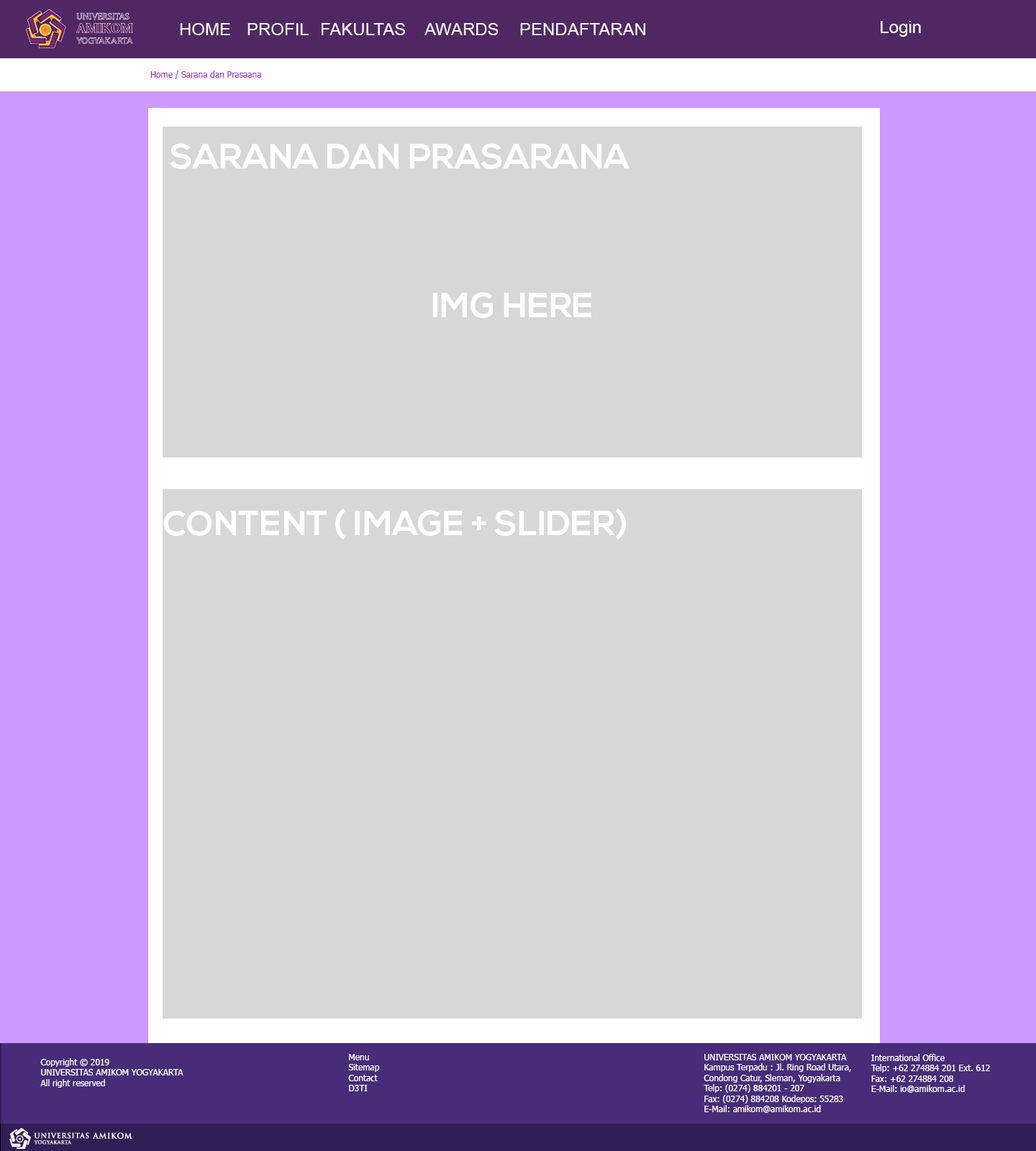
<style>
.page{position:relative;width:1036px;height:1151px;background:#d7d7d7}
.page>*{position:absolute;margin:0}
.t1{font:17.3px "ArialMT";color:#f7f7f7}
.t2{font:17.3px "ArialMT";color:#ffffff}
.t3{font:8.6px "Tahoma";color:#a135d9}
.t4{font:34.5px "NexaBold";color:#ffffff}
.t5{font:8.6px "Tahoma";color:#ffffff}
</style>
<div class="page">
<p class="t1" style="left:180px;top:23px;width:50px;height:12px">HOME</p>
<p class="t1" style="left:247px;top:23px;width:62px;height:12px">PROFIL</p>
<p class="t1" style="left:322px;top:23px;width:83px;height:12px">FAKULTAS</p>
<p class="t1" style="left:424px;top:23px;width:75px;height:12px">AWARDS</p>
<p class="t1" style="left:520px;top:23px;width:125px;height:12px">PENDAFTARAN</p>
<p class="t2" style="left:881px;top:21px;width:40px;height:16px">Login</p>
<p class="t3" style="left:150px;top:71px;width:111px;height:8px">Home / Sarana dan Prasaana</p>
<p class="t4" style="left:170px;top:143px;width:459px;height:26px">SARANA DAN PRASARANA</p>
<p class="t4" style="left:432px;top:292px;width:159px;height:26px">IMG HERE</p>
<p class="t4" style="left:163px;top:509px;width:463px;height:31px">CONTENT ( IMAGE + SLIDER)</p>
<p class="t5" style="left:40px;top:1058px;width:143px;height:30px">Copyright © 2019<br>UNIVERSITAS AMIKOM YOGYAKARTA<br>All right reserved</p>
<p class="t5" style="left:348px;top:1054px;width:32px;height:37px">Menu<br>Sitemap<br>Contact<br>D3TI</p>
<p class="t5" style="left:704px;top:1054px;width:147px;height:59px">UNIVERSITAS AMIKOM YOGYAKARTA<br>Kampus Terpadu : Jl. Ring Road Utara,<br>Condong Catur, Sleman, Yogyakarta<br>Telp: (0274) 884201 - 207<br>Fax: (0274) 884208 Kodepos: 55283<br>E-Mail: amikom@amikom.ac.id</p>
<p class="t5" style="left:870px;top:1054px;width:120px;height:39px">International Office<br>Telp: +62 274884 201 Ext. 612<br>Fax: +62 274884 208<br>E-Mail: io@amikom.ac.id</p>
</div>
